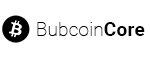
<style>
.page{position:relative;width:150px;height:57px;background:#ffffff}
.page>*{position:absolute;margin:0}
.t1{font:19.4px "Roboto-Thin";color:#000000}
.t2{font:19.4px "Roboto-Bold";color:#000000}
</style>
<div class="page">
<p class="t1" style="left:37px;top:22px;width:108px;height:14px">Bubcoin<span class="t2">Core</span></p>
</div>
